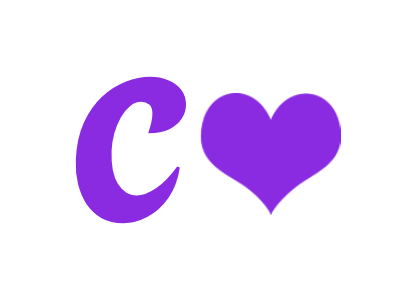
<style>
.page{position:relative;width:401px;height:300px;background:#ffffff}
.page>*{position:absolute;margin:0}
.t1{font:200px "Agbalumo-Regular";color:#8a2be2}
</style>
<div class="page">
<p class="t1" style="left:75px;top:76px;width:111px;height:148px">C</p>
</div>
